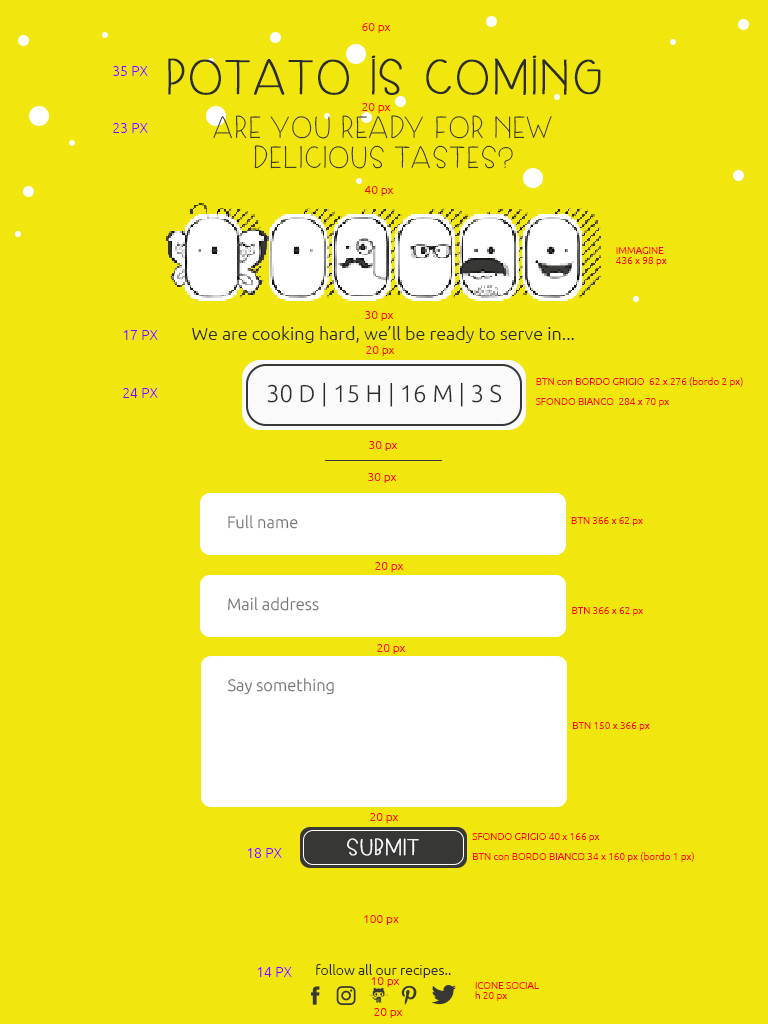
<style>
.page{position:relative;width:768px;height:1024px;background:#f1e60d}
.page>*{position:absolute;margin:0}
.t1{font:12px "Ubuntu-Light";color:#ff0000}
.t2{font:48px "SkipLegDay";color:#2c2c2b;font-weight:bold}
.t3{font:14px "Ubuntu-Light";color:#8400ff}
.t4{font:30px/30px "SkipLegDay";color:#2c2c2b}
.t5{font:10px/10px "Ubuntu-Light";color:#ff0000}
.t6{font:10px/30px "Ubuntu-Light";color:#ff0000}
.t7{font:18px "Ubuntu-Light";color:#2c2c2b}
.t8{font:24.1px "Ubuntu-Light";color:#2c2c2b;text-transform:uppercase}
.t9{font:16.4px "Ubuntu-Light";color:#737372}
.t10{font:22.3px "SkipLegDay";color:#ffffff;font-weight:bold}
.t11{font:14px "Ubuntu-Light";color:#2c2c2b}
</style>
<div class="page">
<p class="t1" style="left:362px;top:23px;width:29px;height:10px">60 px</p>
<p class="t2" style="left:168px;top:55px;width:433px;height:40px">potato is coming</p>
<p class="t3" style="left:113px;top:66px;width:35px;height:10px">35 PX</p>
<p class="t1" style="left:362px;top:103px;width:29px;height:10px">20 px</p>
<p class="t3" style="left:113px;top:123px;width:35px;height:10px">23 PX</p>
<p class="t4" style="left:213px;top:115px;width:339px;height:54px;text-align:center">ARE YOU READY FOR NEW <br>DELICIOUS TASTES?</p>
<p class="t1" style="left:364px;top:186px;width:30px;height:10px">40 px</p>
<p class="t5" style="left:616px;top:247px;width:51px;height:19px">IMMAGINE<br>436 x 98 px<br><span class="t6"><br><br>BTN<br>BTN</span></p>
<p class="t1" style="left:365px;top:311px;width:29px;height:10px">30 px</p>
<p class="t7" style="left:192px;top:326px;width:382px;height:17px">We are cooking hard, we’ll be ready to serve in...</p>
<p class="t3" style="left:123px;top:330px;width:35px;height:10px">17 PX</p>
<p class="t1" style="left:366px;top:346px;width:29px;height:10px">20 px</p>
<p class="t5" style="left:536px;top:377px;width:207px;height:30px">BTN con BORDO GRIGIO  62 x 276 (bordo 2 px) <br><br>SFONDO BIANCO  284 x 70 px<br><span class="t6"><br><br>BTN<br>BTN</span></p>
<p class="t3" style="left:123px;top:388px;width:35px;height:10px">24 PX</p>
<p class="t8" style="left:267px;top:382px;width:235px;height:25px">30 d | 15 H | 16 M | 3 s</p>
<p class="t1" style="left:369px;top:441px;width:29px;height:10px">30 px</p>
<p class="t1" style="left:368px;top:473px;width:29px;height:10px">30 px</p>
<p class="t9" style="left:228px;top:515px;width:70px;height:14px">Full name</p>
<p class="t5" style="left:571px;top:517px;width:72px;height:9px">BTN 366 x 62 px<br><span class="t6"><br><br>BTN<br>BTN</span></p>
<p class="t1" style="left:375px;top:562px;width:29px;height:10px">20 px</p>
<p class="t9" style="left:228px;top:597px;width:91px;height:14px">Mail address</p>
<p class="t5" style="left:572px;top:607px;width:72px;height:9px">BTN 366 x 62 px<br><span class="t6"><br><br>BTN<br>BTN</span></p>
<p class="t1" style="left:377px;top:644px;width:29px;height:10px">20 px</p>
<p class="t9" style="left:228px;top:678px;width:106px;height:17px">Say something</p>
<p class="t5" style="left:573px;top:722px;width:77px;height:9px">BTN 150 x 366 px<br><span class="t6"><br><br>BTN<br>BTN</span></p>
<p class="t1" style="left:370px;top:813px;width:29px;height:10px">20 px</p>
<p class="t5" style="left:472px;top:833px;width:222px;height:29px">SFONDO GRIGIO 40 x 166 px<br><br>BTN con BORDO BIANCO 34 x 160 px (bordo 1 px)<br><span class="t6"><br><br>BTN<br>BTN</span></p>
<p class="t10" style="left:347px;top:838px;width:72px;height:18px">SUBMIT</p>
<p class="t3" style="left:247px;top:848px;width:35px;height:10px">18 PX</p>
<p class="t1" style="left:364px;top:915px;width:35px;height:10px">100 px</p>
<p class="t11" style="left:316px;top:964px;width:135px;height:14px">follow all our recipes..</p>
<p class="t3" style="left:257px;top:967px;width:35px;height:10px">14 PX</p>
<p class="t1" style="left:371px;top:977px;width:29px;height:10px">10 px</p>
<p class="t5" style="left:475px;top:982px;width:64px;height:19px">ICONE SOCIAL<br>h 20 px<br><span class="t6"><br><br>BTN<br>BTN</span></p>
<p class="t1" style="left:374px;top:1008px;width:29px;height:10px">20 px</p>
</div>
